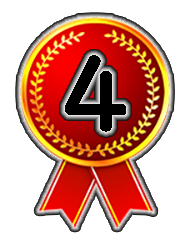
<style>
.page{position:relative;width:192px;height:240px;background:#ffffff}
.page>*{position:absolute;margin:0}
.t1{font:100px "UDDigiKyokashoNP-B";color:#000000}
</style>
<div class="page">
<p class="t1" style="left:65px;top:55px;width:61px;height:77px">4</p>
</div>
